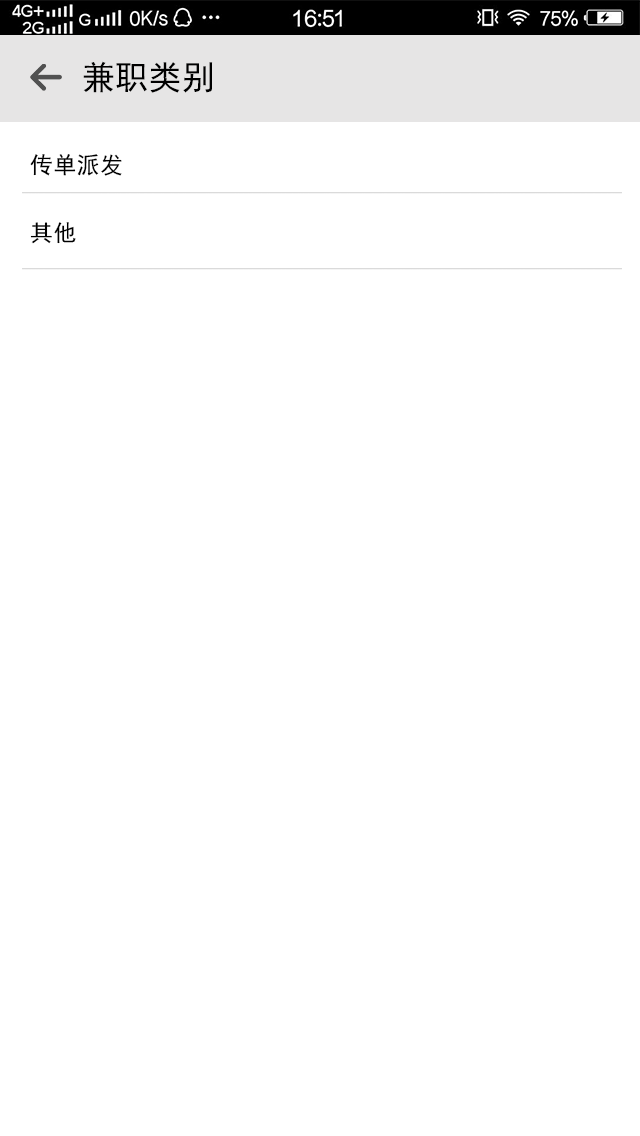
<style>
.page{position:relative;width:640px;height:1136px;background:#ffffff}
.page>*{position:absolute;margin:0}
.t1{font:33.3px "SimHei";letter-spacing:0.002em;color:#000000}
.t2{font:23.3px "SimHei";letter-spacing:0.002em;color:#000000}
</style>
<div class="page">
<p class="t1" style="left:83px;top:61px;width:130px;height:32px">兼职类别</p>
<p class="t2" style="left:30px;top:154px;width:92px;height:22px">传单派发</p>
<p class="t2" style="left:30px;top:222px;width:46px;height:22px">其他</p>
</div>
